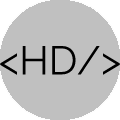
<style>
.page{position:relative;width:120px;height:120px;background:#c0c0c0}
.page>*{position:absolute;margin:0}
.t1{font:40px "Raleway-Regular";color:#000000}
</style>
<div class="page">
<p class="t1" style="left:0px;top:46px;width:120px;height:29px">&lt;HD/&gt;</p>
</div>
